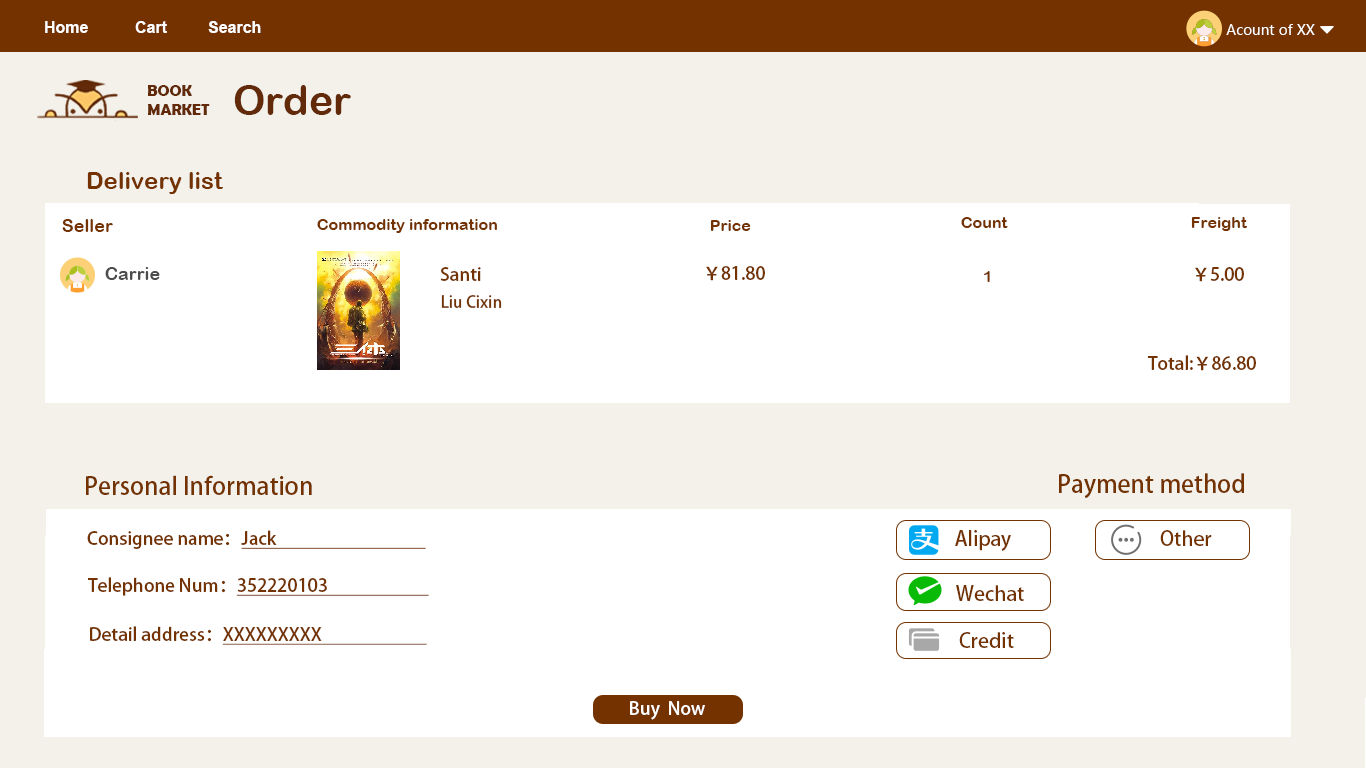
<style>
.page{position:relative;width:1366px;height:768px;background:#ffffff}
.page>*{position:absolute;margin:0}
.t1{font:16px "Arial-BoldMT";color:#ffffff}
.t2{font:14px "MicrosoftYaHeiUI";color:#ffffff}
.t3{font:15.9px/9.5px "BerlinSansFBDemi-Bold";color:#622a09}
.t4{font:40.9px "ArialRoundedMTBold";color:#622a09}
.t5{font:24px "ArialRoundedMTBold";color:#743200}
.t6{font:18px "ArialRoundedMTBold";color:#743200}
.t7{font:16px "ArialRoundedMTBold";color:#743200}
.t8{font:18px "ArialRoundedMTBold";color:#4d4c4c}
.t9{font:18px "AdobeHeitiStd-Regular";color:#743200}
.t10{font:16px "AdobeHeitiStd-Regular";color:#743200}
.t11{font:24px "AdobeHeitiStd-Regular";color:#743200}
.t12{font:18px "AdobeHeitiStd-Regular";color:#743200;text-decoration:underline}
.t13{font:20px "AdobeHeitiStd-Regular";color:#743200}
.t14{font:18px "AdobeHeitiStd-Regular";color:#ffffff}
</style>
<div class="page">
<p class="t1" style="left:45px;top:21px;width:43px;height:12px">Home</p>
<p class="t1" style="left:135px;top:21px;width:32px;height:12px">Cart</p>
<p class="t1" style="left:208px;top:21px;width:53px;height:12px">Search</p>
<p class="t2" style="left:1226px;top:24px;width:89px;height:11px">Acount of XX</p>
<p class="t3" style="left:148px;top:85px;width:62px;height:30px">BOOK <br><br>MARKET</p>
<p class="t4" style="left:234px;top:85px;width:117px;height:30px">Order</p>
<p class="t5" style="left:87px;top:172px;width:136px;height:22px">Delivery list</p>
<p class="t6" style="left:62px;top:219px;width:51px;height:13px">Seller</p>
<p class="t7" style="left:317px;top:219px;width:180px;height:14px">Commodity information</p>
<p class="t7" style="left:710px;top:220px;width:41px;height:11px">Price</p>
<p class="t7" style="left:961px;top:217px;width:47px;height:11px">Count</p>
<p class="t7" style="left:1191px;top:217px;width:56px;height:14px">Freight</p>
<p class="t8" style="left:105px;top:267px;width:55px;height:13px">Carrie</p>
<p class="t9" style="left:440px;top:267px;width:41px;height:14px">Santi</p>
<p class="t9" style="left:706px;top:266px;width:59px;height:15px">￥81.80</p>
<p class="t9" style="left:1195px;top:267px;width:49px;height:15px">￥5.00</p>
<p class="t7" style="left:984px;top:271px;width:6px;height:11px">1</p>
<p class="t10" style="left:441px;top:295px;width:61px;height:13px">Liu Cixin</p>
<p class="t9" style="left:1147px;top:355px;width:109px;height:16px">Total:￥86.80</p>
<p class="t11" style="left:1059px;top:473px;width:185px;height:26px">Payment method</p>
<p class="t11" style="left:86px;top:475px;width:226px;height:20px">Personal Information</p>
<p class="t9" style="left:87px;top:530px;width:339px;height:19px">Consignee name：<span class="t12">Jack</span></p>
<p class="t13" style="left:955px;top:530px;width:56px;height:21px">Alipay</p>
<p class="t13" style="left:1160px;top:530px;width:52px;height:16px">Other</p>
<p class="t9" style="left:88px;top:577px;width:341px;height:19px">Telephone Num：<span class="t12">352220103</span></p>
<p class="t13" style="left:956px;top:585px;width:68px;height:16px">Wechat</p>
<p class="t9" style="left:90px;top:626px;width:337px;height:19px">Detail address：<span class="t12">XXXXXXXXX</span></p>
<p class="t13" style="left:959px;top:632px;width:55px;height:16px">Credit</p>
<p class="t14" style="left:630px;top:701px;width:75px;height:19px">Buy  Now</p>
</div>
